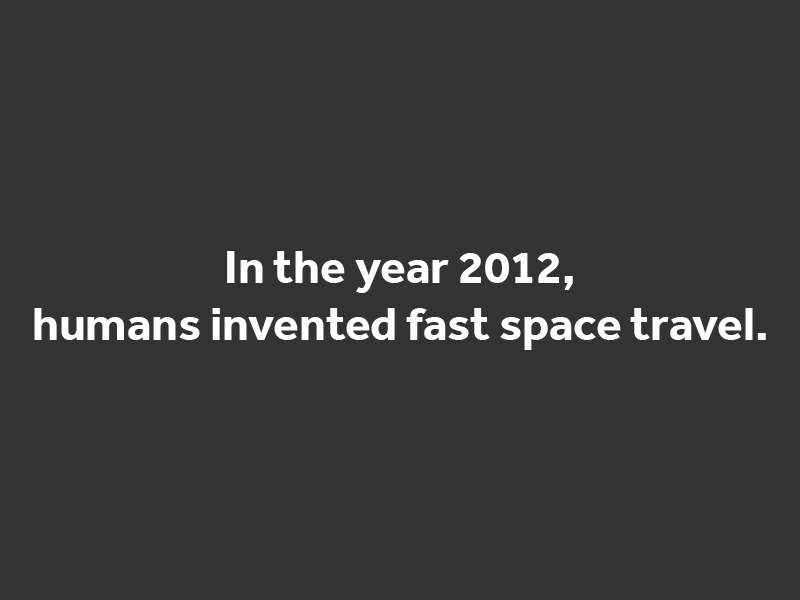
<style>
.page{position:relative;width:800px;height:600px;background:#333333}
.page>*{position:absolute;margin:0}
.t1{font:47.9px "Effra-Bold";color:#ffffff}
</style>
<div class="page">
<p class="t1" style="left:34px;top:251px;width:732px;height:99px;text-align:center">In the year 2012,<br>humans invented fast space travel.</p>
</div>
